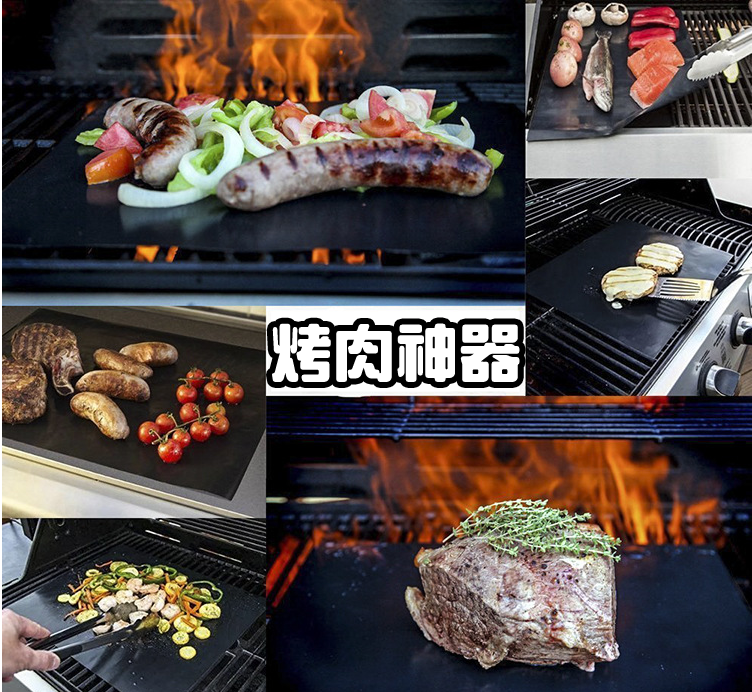
<style>
.page{position:relative;width:752px;height:692px}
.page>*{position:absolute;margin:0}
.t1{font:60px "HanWangZonYi";letter-spacing:0.01em;color:#ffffff;font-weight:bold}
</style>
<div class="page">
<p class="t1" style="left:272px;top:323px;width:248px;height:59px">烤肉神器</p>
</div>
